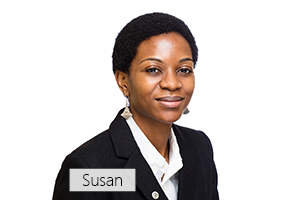
<style>
.page{position:relative;width:300px;height:200px;background:#ffffff}
.page>*{position:absolute;margin:0}
.t1{font:16.7px "SegoeUI-Light";color:#000000}
</style>
<div class="page">
<p class="t1" style="left:83px;top:174px;width:39px;height:12px">Susan</p>
</div>
